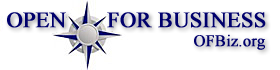
<style>
.page{position:relative;width:280px;height:70px;background:#ffffff}
.page>*{position:absolute;margin:0}
.t1{font:22px "TimesNewRomanPSMT";color:#00006c;font-weight:bold}
.t2{font:16px "TimesNewRomanPSMT";color:#00006c;font-weight:bold}
</style>
<div class="page">
<p class="t1" style="left:7px;top:12px;width:59px;height:16px">OPEN</p>
<p class="t1" style="left:107px;top:12px;width:159px;height:16px">FOR BUSINESS</p>
<p class="t2" style="left:194px;top:34px;width:71px;height:16px">OFBiz.org</p>
</div>
